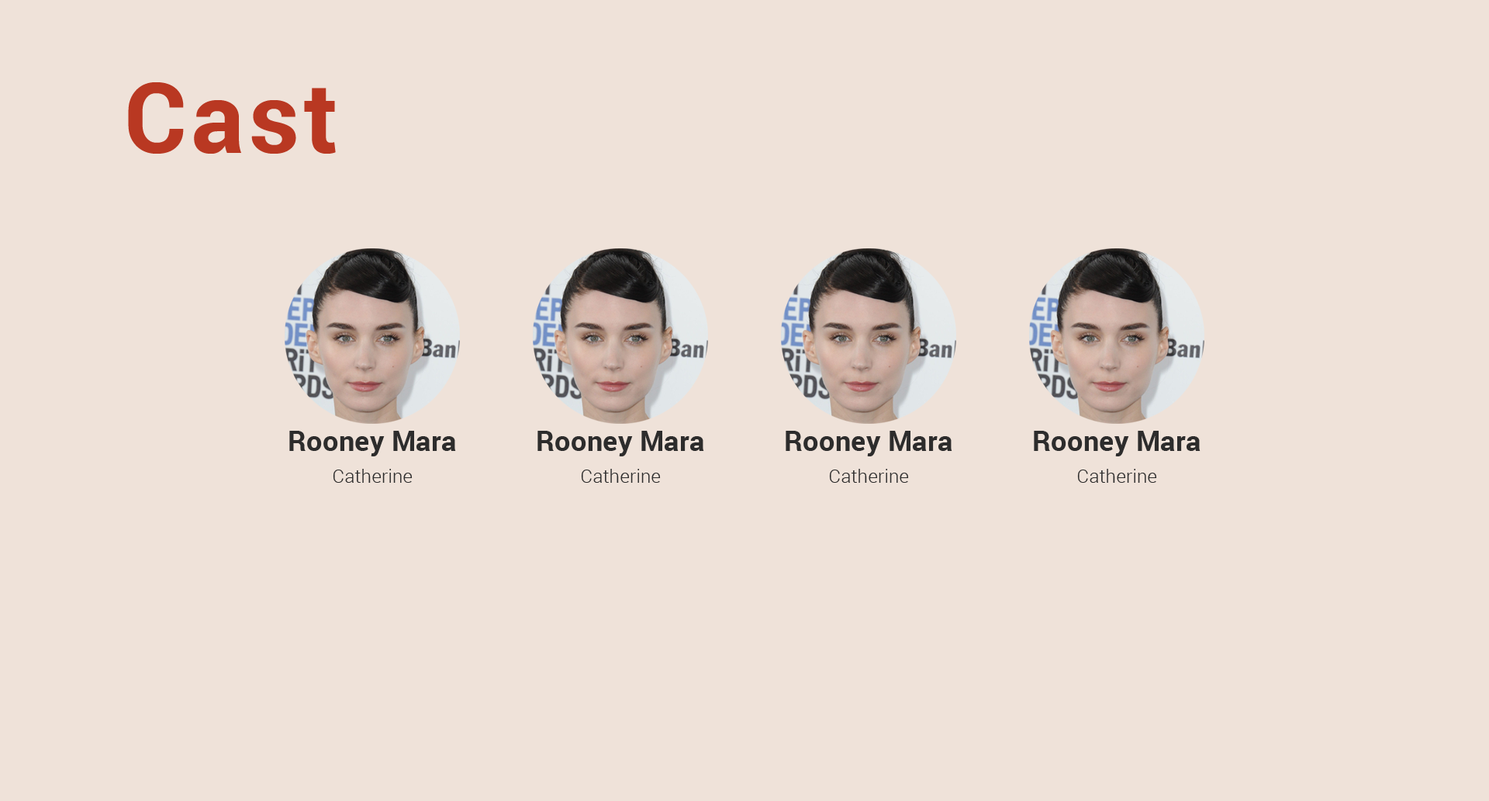
<style>
.page{position:relative;width:1489px;height:801px;background:#efe2d9}
.page>*{position:absolute;margin:0}
.t1{font:97.6px "Roboto-Bold";letter-spacing:0.05em;color:#b93822}
.t2{font:27.9px "Roboto-Bold";letter-spacing:0.01em;color:#2d2c2c}
.t3{font:18.6px "Roboto-Light";letter-spacing:0.01em;color:#2d2c2c}
</style>
<div class="page">
<p class="t1" style="left:128px;top:82px;width:208px;height:72px">Cast</p>
<p class="t2" style="left:289px;top:431px;width:167px;height:25px">Rooney Mara</p>
<p class="t2" style="left:538px;top:431px;width:166px;height:25px">Rooney Mara</p>
<p class="t2" style="left:786px;top:431px;width:167px;height:25px">Rooney Mara</p>
<p class="t2" style="left:1034px;top:431px;width:167px;height:25px">Rooney Mara</p>
<p class="t3" style="left:333px;top:469px;width:80px;height:14px">Catherine</p>
<p class="t3" style="left:581px;top:469px;width:80px;height:14px">Catherine</p>
<p class="t3" style="left:829px;top:469px;width:80px;height:14px">Catherine</p>
<p class="t3" style="left:1078px;top:469px;width:79px;height:14px">Catherine</p>
</div>
